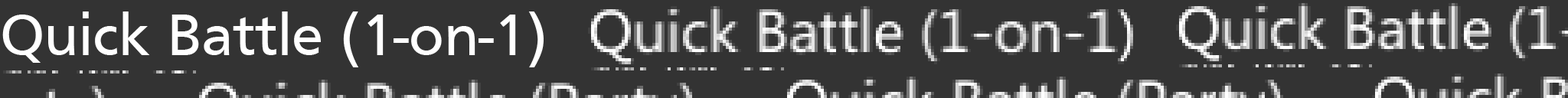
<style>
.page{position:relative;width:1568px;height:98px;background:#333333}
.page>*{position:absolute;margin:0}
.t1{font:60.4px "Frutiger";color:#ffffff}
</style>
<div class="page">
<p class="t1" style="left:2px;top:11px;width:542px;height:56px">Quick Battle (1-on-1)</p>
</div>
